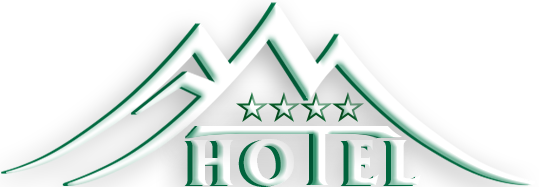
<style>
.page{position:relative;width:539px;height:187px;background:#ffffff}
.page>*{position:absolute;margin:0}
.t1{font:67.7px "FrizQuadrataStd-Bold";letter-spacing:0.12em}
</style>
<div class="page">
<p class="t1" style="left:184px;top:140px;width:232px;height:47px">HO EL</p>
</div>
